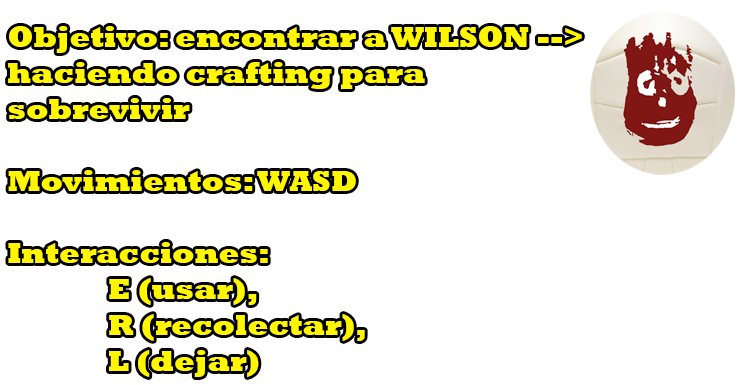
<style>
.page{position:relative;width:750px;height:385px;background:#ffffff}
.page>*{position:absolute;margin:0}
.t1{font:30px "Rockwell-ExtraBold";color:#fff600}
</style>
<div class="page">
<p class="t1" style="left:8px;top:26px;width:574px;height:351px">Objetivo: encontrar a WILSON --&gt;<br> haciendo crafting para<br> sobrevivir<br><br> Movimientos: WASD<br><br> Interacciones: <br>   E (usar), <br>   R (recolectar),<br>   L (dejar)</p>
</div>
